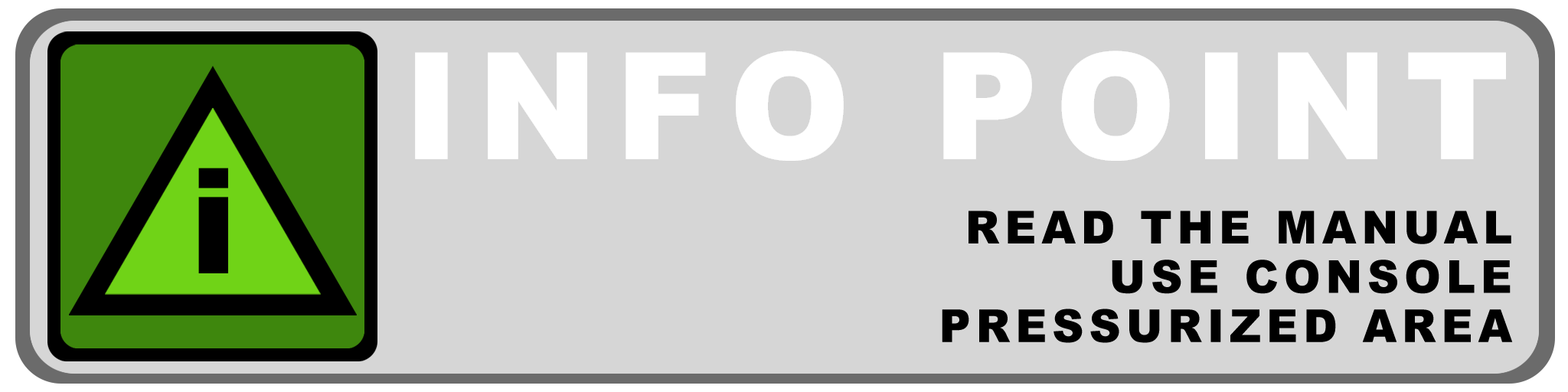
<style>
.page{position:relative;width:1568px;height:392px;background:#d6d6d6}
.page>*{position:absolute;margin:0}
.t1{font:148.3px "Arial-Black";letter-spacing:0.12em;color:#ffffff}
.t2{font:146.8px "Arial-Black";letter-spacing:0.12em;color:#000000}
.t3{font:45.5px "Arial-Black";letter-spacing:0.12em;color:#000000;scale:0.96 1}
</style>
<div class="page">
<p class="t1" style="left:415px;top:51px;width:1091px;height:110px">INFO POINT</p>
<p class="t2" style="left:198px;top:168px;width:30px;height:105px">i</p>
<p class="t3" style="left:969px;top:211px;width:542px;height:33px">READ THE MANUAL</p>
<p class="t3" style="left:1112px;top:260px;width:399px;height:34px">USE CONSOLE</p>
<p class="t3" style="left:942px;top:309px;width:571px;height:34px">PRESSURIZED AREA</p>
</div>
